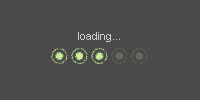
<style>
.page{position:relative;width:200px;height:100px;background:#4b4a4b}
.page>*{position:absolute;margin:0}
.t1{font:11px "ArialMT";color:#cdcdcd}
</style>
<div class="page">
<p class="t1" style="left:78px;top:32px;width:42px;height:10px">loading...</p>
</div>
